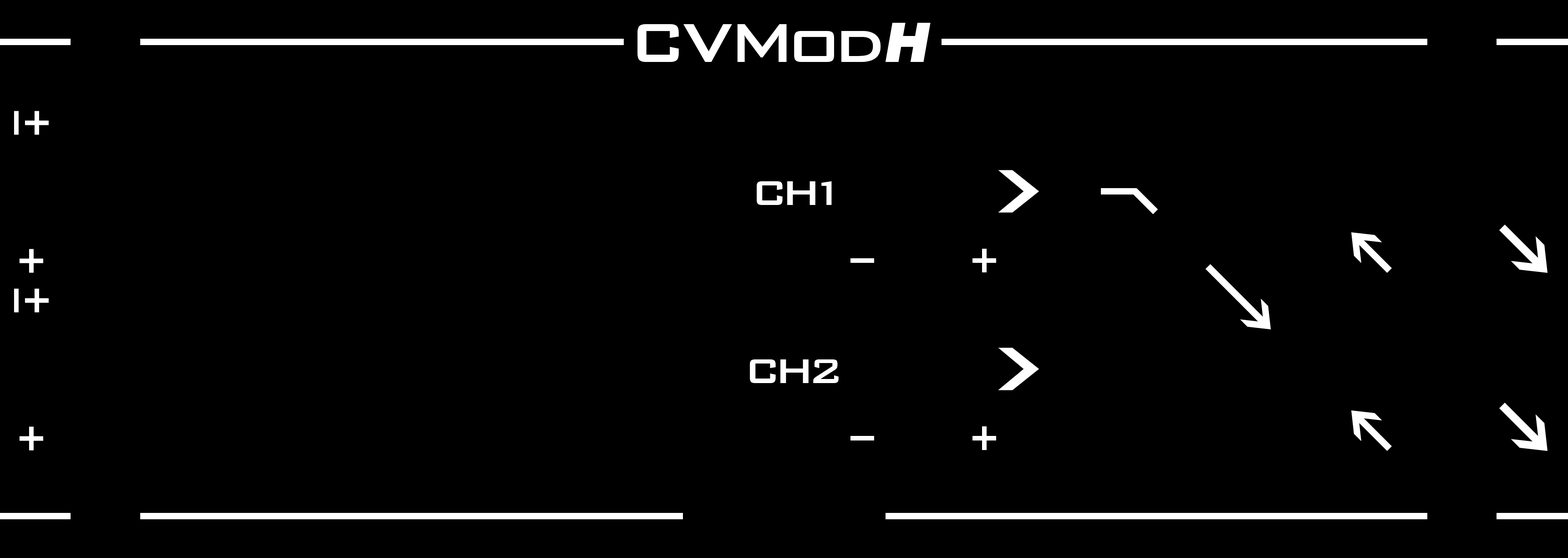
<style>
.page{position:relative;width:1568px;height:558px;background:#000000}
.page>*{position:absolute;margin:0}
.t1{font:72.8px "BankGothicBT-Medium";letter-spacing:-0.06em;color:#ffffff}
.t2{font:72.8px "BankGothicBT-Medium";letter-spacing:-0.1em;color:#ffffff}
.t3{font:72.8px "BankGothicBT-Medium";letter-spacing:-0.08em;color:#ffffff}
.t4{font:54.5px "HelveticaLTStd-BlkObl";letter-spacing:-0.06em;color:#ffffff}
.t5{font:45.5px "BankGothicBT-Medium";letter-spacing:-0.14em;color:#ffffff}
.t6{font:45.5px "BankGothicBT-Medium";letter-spacing:-0.24em;color:#ffffff}
</style>
<div class="page">
<p class="t1" style="left:637px;top:24px;width:244px;height:38px">CV<span class="t2">M</span><span class="t3">o</span>d</p>
<p class="t4" style="left:886px;top:23px;width:45px;height:39px">H</p>
<p class="t5" style="left:757px;top:181px;width:75px;height:24px">C<span class="t6">H</span>1</p>
<p class="t5" style="left:750px;top:359px;width:89px;height:24px">CH2</p>
</div>
